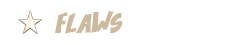
<style>
.page{position:relative;width:250px;height:45px;background:#ffffff}
.page>*{position:absolute;margin:0}
.t1{font:30px "HoustonComicsPersonalUse";color:#cdb99d}
</style>
<div class="page">
<p class="t1" style="left:55px;top:11px;width:68px;height:23px">FLAWS</p>
</div>
